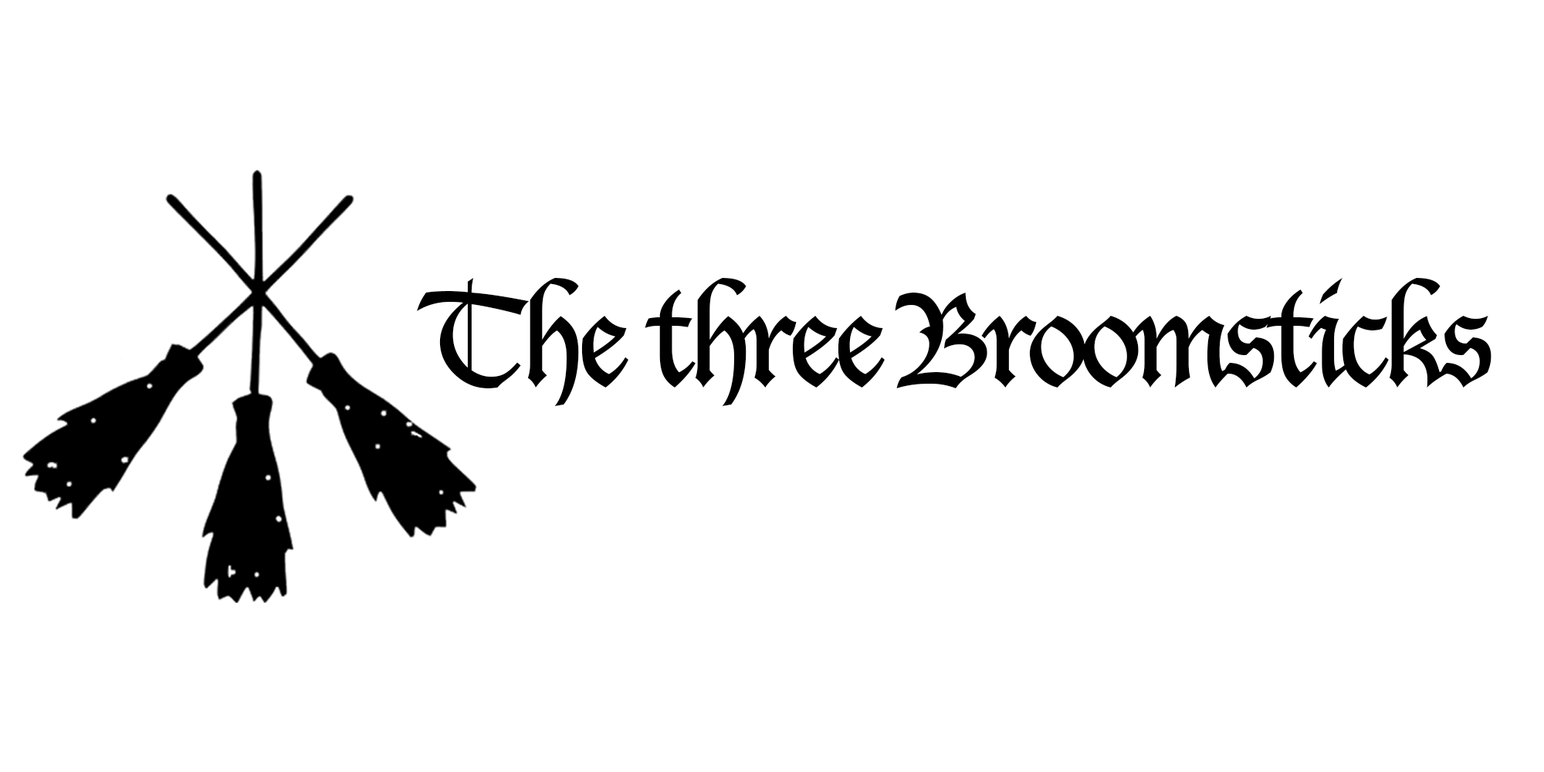
<style>
.page{position:relative;width:1544px;height:772px;background:#ffffff}
.page>*{position:absolute;margin:0}
.t1{font:126.8px "LucidaBlackletter";letter-spacing:-0.07em;color:#000000}
</style>
<div class="page">
<p class="t1" style="left:417px;top:278px;width:1075px;height:128px">The three Broomsticks</p>
<p class="t1" style="left:417px;top:278px;width:1075px;height:128px">The three Broomsticks</p>
</div>
